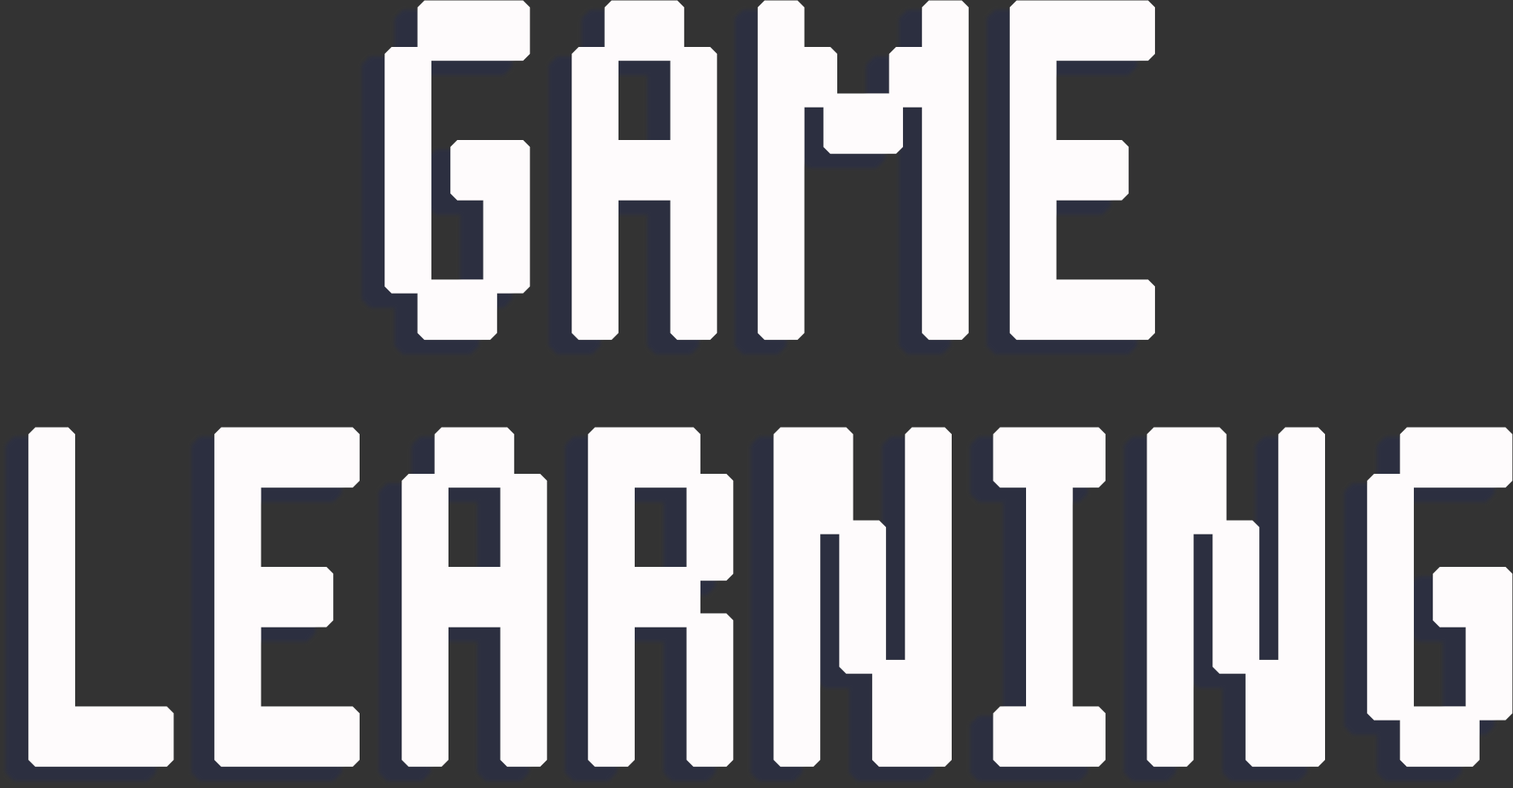
<style>
.page{position:relative;width:1513px;height:788px;background:#333333}
.page>*{position:absolute;margin:0}
.t1{font:605px "Pixelade";letter-spacing:0.025em;color:#fefbfc;font-weight:bold;scale:0.71 1}
</style>
<div class="page">
<p class="t1" style="left:28px;top:0px;width:1485px;height:768px">GAME LEARNING</p>
</div>
